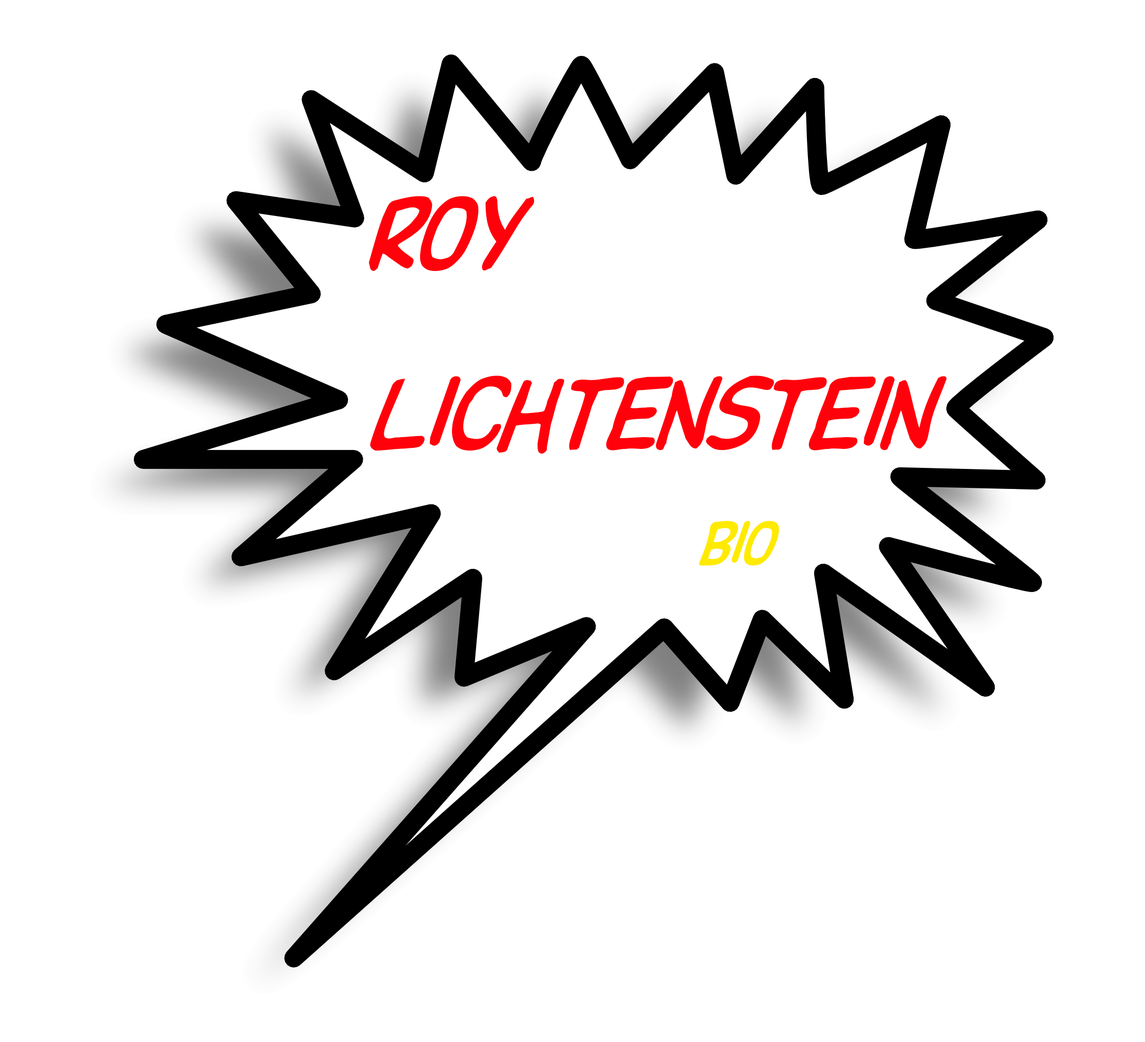
<style>
.page{position:relative;width:1145px;height:1042px;background:#ffffff}
.page>*{position:absolute;margin:0}
.t1{font:102.6px "DupuyBALloon-Italic";color:#ff010b}
.t2{font:61.5px "DupuyBALloon-Italic";color:#ffea01}
</style>
<div class="page">
<p class="t1" style="left:369px;top:196px;width:578px;height:258px">roy <br>lichtenstein</p>
<p class="t2" style="left:699px;top:521px;width:80px;height:45px">bio</p>
</div>
